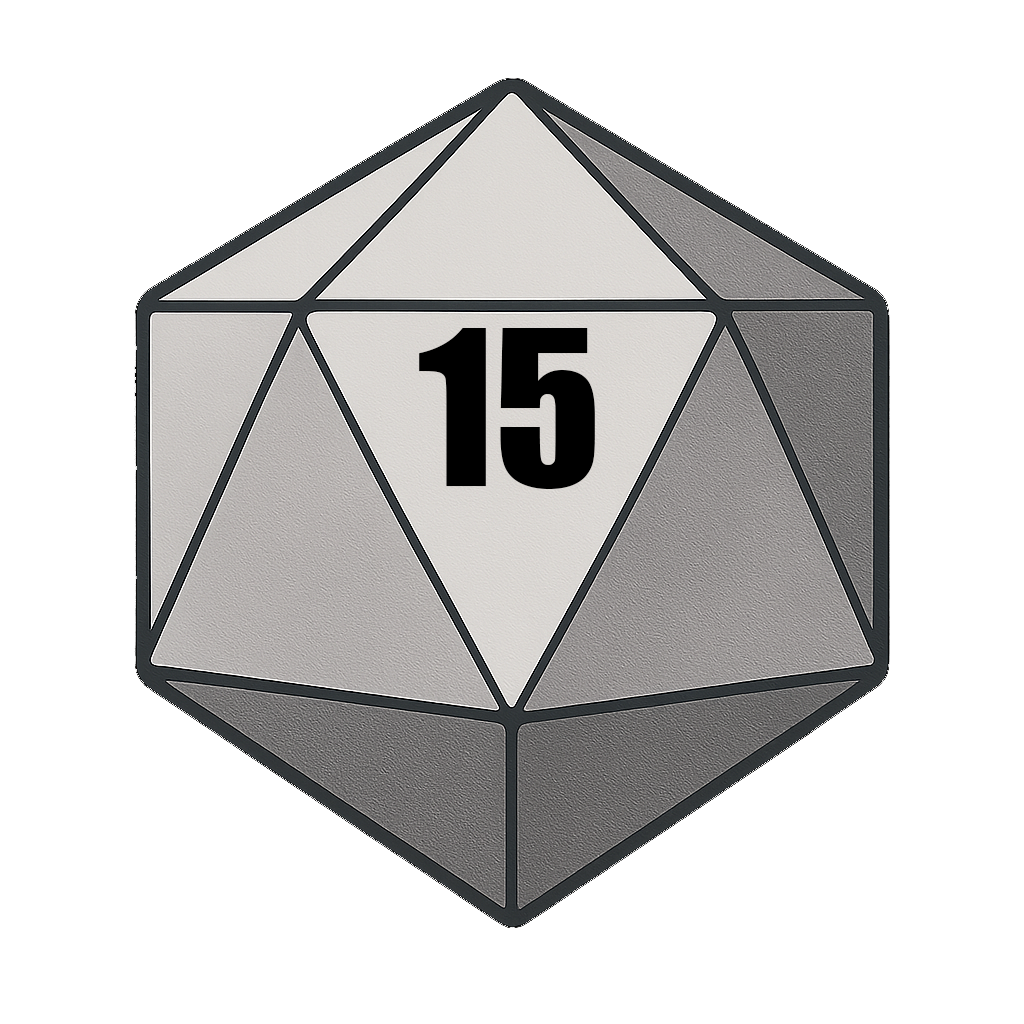
<style>
.page{position:relative;width:1024px;height:1024px;background:#ffffff}
.page>*{position:absolute;margin:0}
.t1{font:200px "Impact";color:#000000}
</style>
<div class="page">
<p class="t1" style="left:419px;top:328px;width:176px;height:161px">15</p>
</div>
